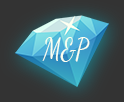
<style>
.page{position:relative;width:124px;height:102px;background:#333333}
.page>*{position:absolute;margin:0}
.t1{font:29.9px "DancingScript";color:#fcffef;scale:0.79 1}
</style>
<div class="page">
<p class="t1" style="left:42px;top:37px;width:48px;height:25px">M&amp;P</p>
</div>
